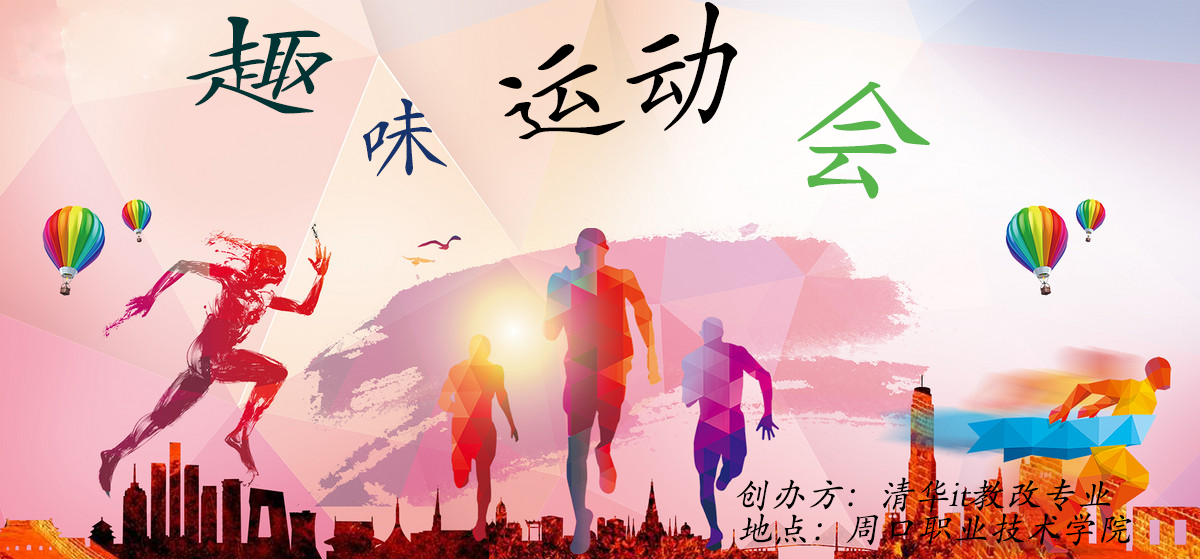
<style>
.page{position:relative;width:1200px;height:559px}
.page>*{position:absolute;margin:0}
.t1{font:90px "STKaiti";color:#000000;font-style:italic}
.t2{font:90px "STKaiti";color:#003333;font-style:italic}
.t3{font:120px "STKaiti";color:#58b54c;font-style:italic}
.t4{font:90px "STKaiti";color:#16336b;font-style:italic}
.t5{font:36px "STKaiti";color:#000000;font-style:italic}
</style>
<div class="page">
<p class="t1" style="left:498px;top:2px;width:240px;height:138px;rotate:-2deg">运动</p>
<p class="t2" style="left:186px;top:16px;width:147px;height:98px;rotate:7deg">趣</p>
<p class="t3" style="left:797px;top:81px;width:133px;height:118px;rotate:6deg">会</p>
<p class="t4" style="left:363px;top:98px;width:84px;height:79px;rotate:-13deg">味</p>
<p class="t5" style="left:736px;top:477px;width:375px;height:36px">创办方：清华it教改专业</p>
<p class="t5" style="left:739px;top:513px;width:393px;height:33px">地点：周口职业技术学院</p>
</div>
